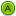
<style>
.page{position:relative;width:16px;height:16px}
.page>*{position:absolute;margin:0}
.t1{font:8px "ArialMT";color:#383838;font-weight:bold;scale:1.18 1}
</style>
<div class="page">
<p class="t1" style="left:4px;top:5px;width:7px;height:7px">A</p>
</div>
